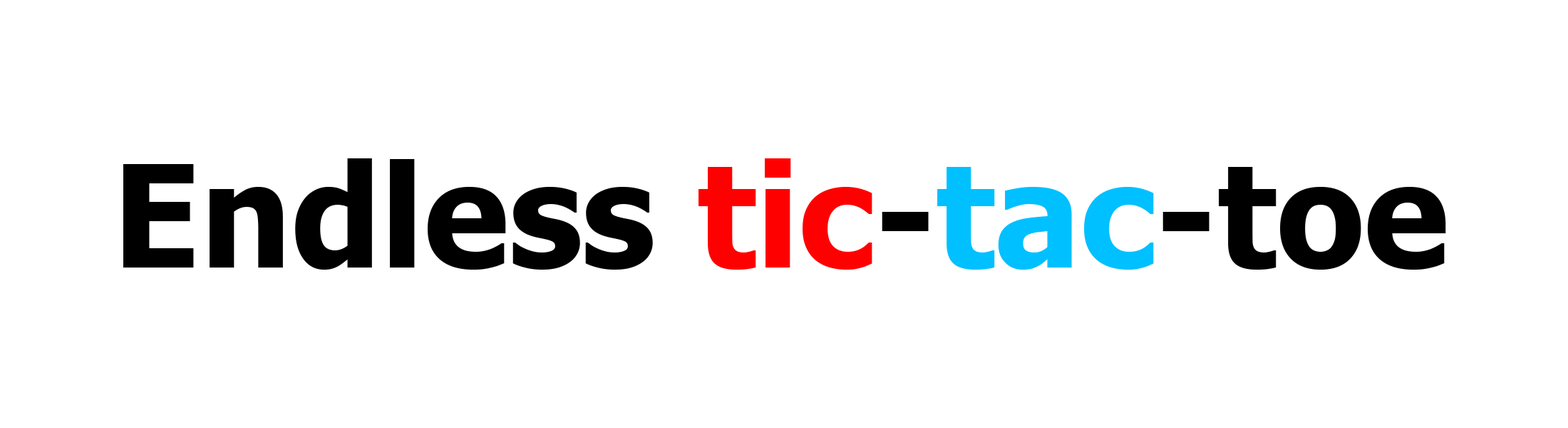
<style>
.page{position:relative;width:1568px;height:428px;background:#ffffff}
.page>*{position:absolute;margin:0}
.t1{font:142.5px "Tahoma-Bold";color:#000000}
.t2{font:142.5px "Tahoma-Bold";color:#ff0000}
.t3{font:142.5px "Tahoma-Bold";color:#00c0ff}
</style>
<div class="page">
<p class="t1" style="left:123px;top:158px;width:1323px;height:111px">Endless <span class="t2">tic</span>-<span class="t3">tac</span>-toe</p>
</div>
